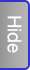
<style>
.page{position:relative;width:30px;height:70px}
.page>*{position:absolute;margin:0}
.t1{font:18.9px "HelveticaNeue";color:#ffffff}
</style>
<div class="page">
<p class="t1" style="left:7px;top:16px;width:15px;height:37px;rotate:90deg">Hide</p>
</div>
